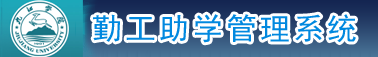
<style>
.page{position:relative;width:378px;height:57px}
.page>*{position:absolute;margin:0}
.t1{font:30px "SimHei";letter-spacing:0.12em;color:#0088df}
</style>
<div class="page">
<p class="t1" style="left:93px;top:14px;width:263px;height:29px">勤工助学管理系统</p>
</div>
